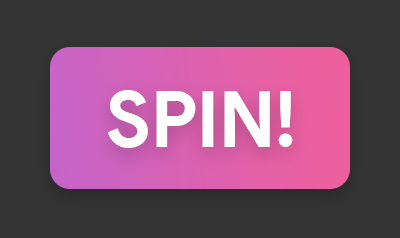
<style>
.page{position:relative;width:400px;height:238px;background:#333333}
.page>*{position:absolute;margin:0}
.t1{font:78px "ProductSans-Bold";color:#ffffff}
</style>
<div class="page">
<p class="t1" style="left:107px;top:90px;width:186px;height:58px">SPIN!</p>
</div>
